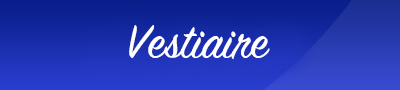
<style>
.page{position:relative;width:400px;height:90px}
.page>*{position:absolute;margin:0}
.t1{font:52px "SignPainter-HouseScript";color:#ffffff}
</style>
<div class="page">
<p class="t1" style="left:129px;top:25px;width:141px;height:35px">Vestiaire</p>
</div>
